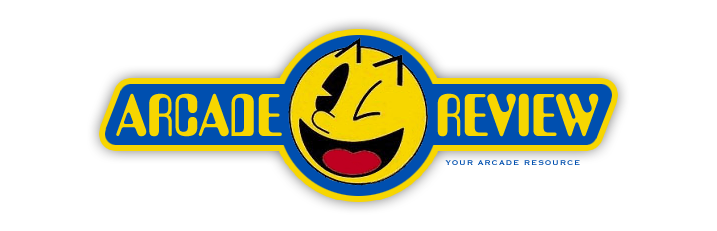
<style>
.page{position:relative;width:717px;height:231px;background:#ffffff}
.page>*{position:absolute;margin:0}
.t1{font:58px "AmeliaBT-Regular";color:#f7d600;text-transform:uppercase}
.t2{font:9px "CopperplateGothicBT-Bold";letter-spacing:0.1em;color:#004faf;text-transform:uppercase}
</style>
<div class="page">
<p class="t1" style="left:116px;top:93px;width:166px;height:44px">arcade</p>
<p class="t1" style="left:437px;top:93px;width:162px;height:44px">review</p>
<p class="t2" style="left:445px;top:160px;width:135px;height:5px">your arcade resource</p>
</div>
